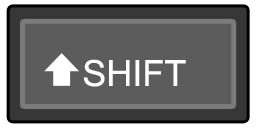
<style>
.page{position:relative;width:256px;height:128px;background:#5c5c5c}
.page>*{position:absolute;margin:0}
.t1{font:36px "ArialMT";color:#ffffff}
</style>
<div class="page">
<p class="t1" style="left:83px;top:59px;width:103px;height:28px">SHIFT</p>
</div>
